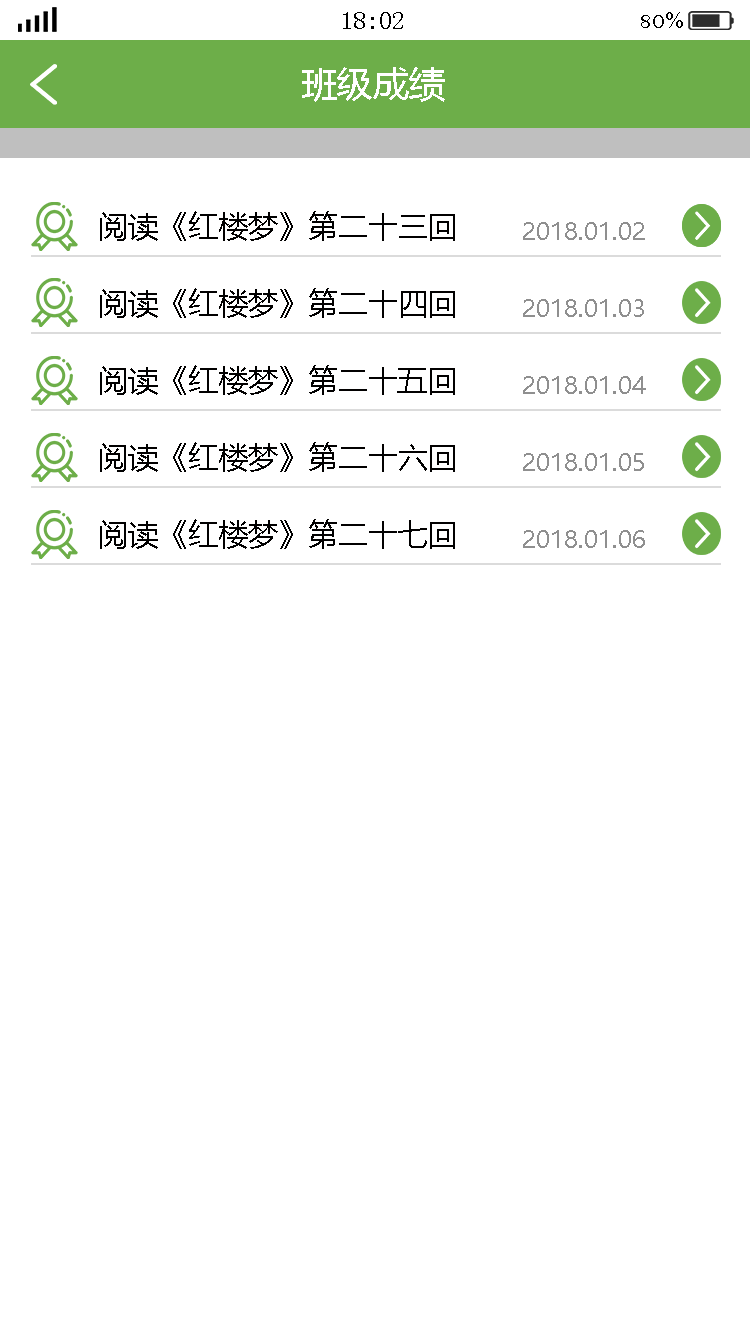
<style>
.page{position:relative;width:750px;height:1334px;background:#ffffff}
.page>*{position:absolute;margin:0}
.t1{font:25px "SimSun";color:#000000}
.t2{font:25px "BellMT";color:#000000}
.t3{font:36px "MicrosoftYaHei";color:#ffffff}
.t4{font:30px "MicrosoftYaHei";color:#010000}
.t5{font:24px "MicrosoftYaHei";color:#8f8f8f}
</style>
<div class="page">
<p class="t1" style="left:343px;top:12px;width:60px;height:17px">18:02</p>
<p class="t2" style="left:641px;top:12px;width:42px;height:16px">80%</p>
<p class="t3" style="left:302px;top:67px;width:143px;height:35px">班级成绩</p>
<p class="t4" style="left:100px;top:211px;width:355px;height:30px">阅读《红楼梦》第二十三回</p>
<p class="t4" style="left:100px;top:211px;width:355px;height:30px">阅读《红楼梦》第二十三回</p>
<p class="t5" style="left:523px;top:222px;width:122px;height:18px">2018.01.02</p>
<p class="t5" style="left:523px;top:222px;width:122px;height:18px">2018.01.02</p>
<p class="t4" style="left:100px;top:288px;width:355px;height:30px">阅读《红楼梦》第二十四回</p>
<p class="t5" style="left:523px;top:299px;width:121px;height:18px">2018.01.03</p>
<p class="t4" style="left:100px;top:365px;width:355px;height:30px">阅读《红楼梦》第二十五回</p>
<p class="t5" style="left:523px;top:376px;width:123px;height:18px">2018.01.04</p>
<p class="t4" style="left:100px;top:442px;width:355px;height:30px">阅读《红楼梦》第二十六回</p>
<p class="t5" style="left:523px;top:453px;width:121px;height:18px">2018.01.05</p>
<p class="t4" style="left:100px;top:519px;width:355px;height:30px">阅读《红楼梦》第二十七回</p>
<p class="t5" style="left:523px;top:530px;width:122px;height:18px">2018.01.06</p>
</div>
